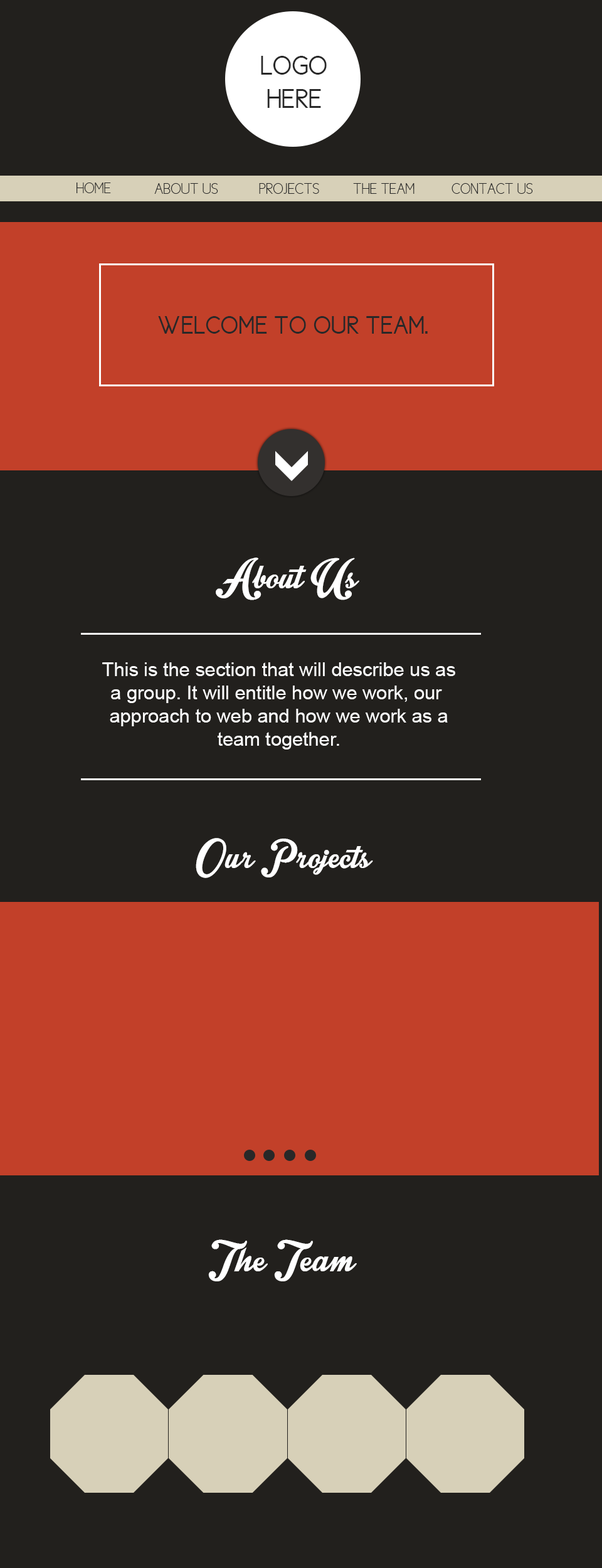
<style>
.page{position:relative;width:602px;height:1568px;background:#22201d}
.page>*{position:absolute;margin:0}
.t1{font:27.7px "NewCicle-Gordita";color:#282828}
.t2{font:14.9px "NewCicle-Fina";color:#282828}
.t3{font:25.9px "NewCicle-Gordita";color:#282828}
.t4{font:52.6px "IntriqueScriptPersonalUse";color:#ffffff}
.t5{font:19.3px "ArialMT";color:#ffffff}
.t6{font:51.6px "IntriqueScriptPersonalUse";color:#ffffff}
.t7{font:54.5px "IntriqueScriptPersonalUse";color:#ffffff}
</style>
<div class="page">
<p class="t1" style="left:261px;top:56px;width:66px;height:52px;text-align:center">LOGO<br>HERE</p>
<p class="t2" style="left:77px;top:183px;width:34px;height:10px">HOME</p>
<p class="t2" style="left:154px;top:183px;width:64px;height:11px">ABOUT US</p>
<p class="t2" style="left:259px;top:183px;width:60px;height:11px">PROJECTS</p>
<p class="t2" style="left:353px;top:183px;width:62px;height:11px">THE TEAM</p>
<p class="t2" style="left:452px;top:183px;width:81px;height:11px">CONTACT US</p>
<p class="t3" style="left:158px;top:316px;width:270px;height:18px">WELCOME TO OUR TEAM.</p>
<p class="t4" style="left:216px;top:558px;width:143px;height:42px">About Us</p>
<p class="t5" style="left:102px;top:662px;width:353px;height:88px;text-align:center">This is the section that will describe us as<br>a group. It will entitle how we work, our <br>approach to web and how we work as a<br>team together.</p>
<p class="t6" style="left:196px;top:838px;width:177px;height:40px">Our Projects</p>
<p class="t7" style="left:208px;top:1239px;width:149px;height:42px">The Team</p>
</div>
